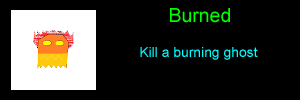
<style>
.page{position:relative;width:300px;height:100px;background:#000000}
.page>*{position:absolute;margin:0}
.t1{font:19.4px "ArialMT";color:#00ff00}
.t2{font:13.9px "ArialMT";color:#00ffff}
</style>
<div class="page">
<p class="t1" style="left:170px;top:8px;width:60px;height:15px">Burned</p>
<p class="t2" style="left:140px;top:47px;width:118px;height:13px">Kill a burning ghost</p>
</div>
